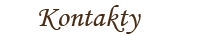
<style>
.page{position:relative;width:200px;height:35px;background:#ffffff}
.page>*{position:absolute;margin:0}
.t1{font:30px "MonotypeCorsiva";color:#472d16}
</style>
<div class="page">
<p class="t1" style="left:39px;top:5px;width:102px;height:29px">Kontakty</p>
</div>
